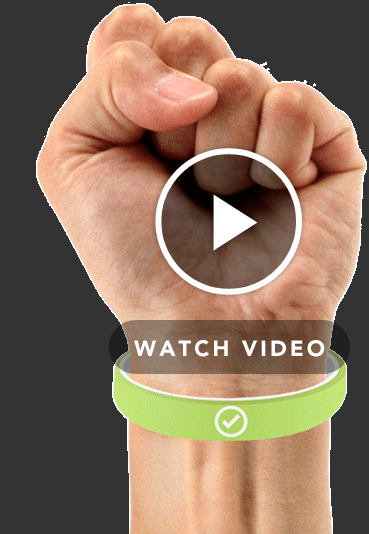
<style>
.page{position:relative;width:369px;height:534px;background:#333333}
.page>*{position:absolute;margin:0}
.t1{font:22px "Avenir-Black";letter-spacing:0.14em;color:#ffffff}
</style>
<div class="page">
<p class="t1" style="left:134px;top:340px;width:191px;height:17px">WATCH VIDEO</p>
</div>
